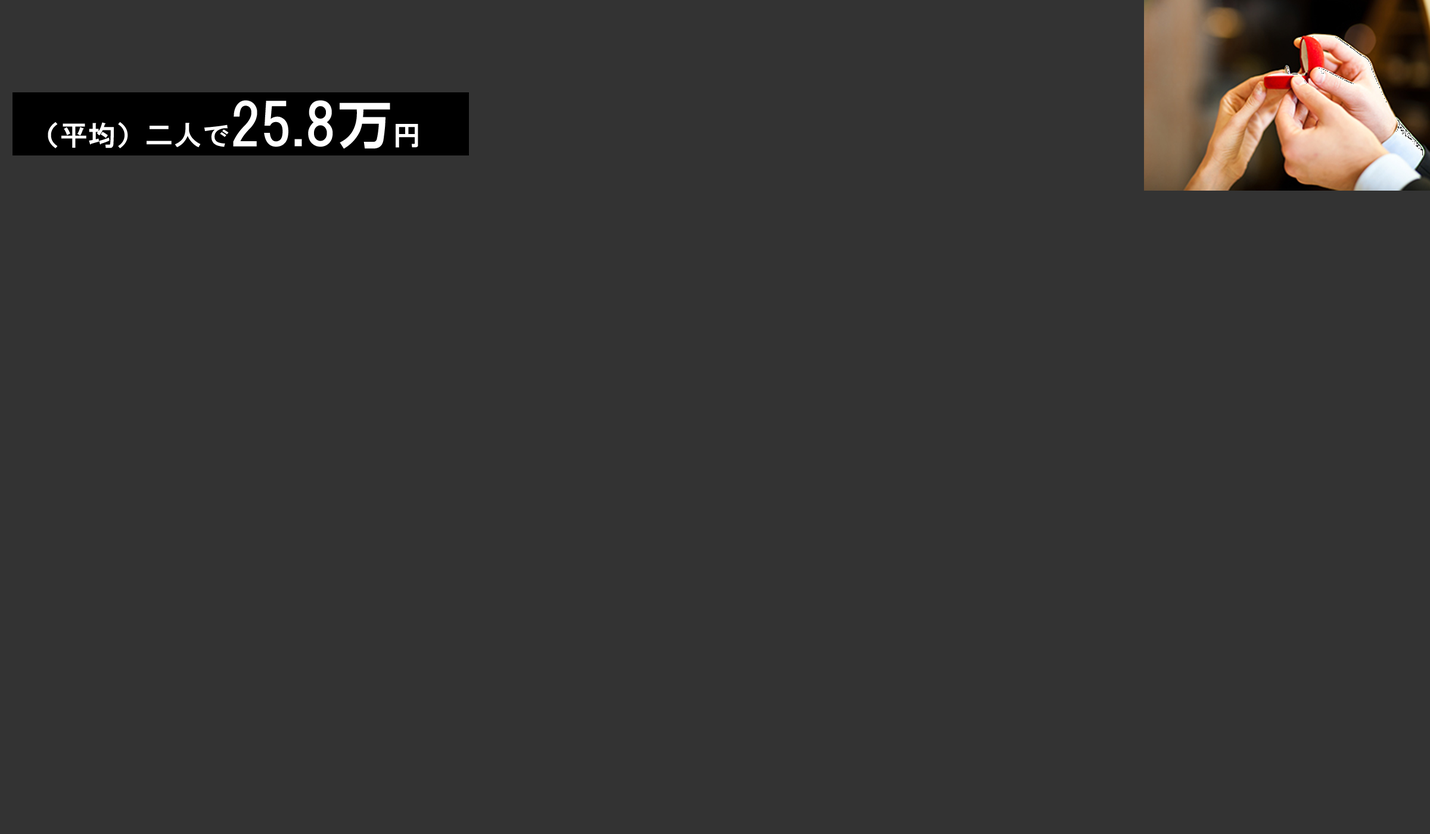
<style>
.page{position:relative;width:1430px;height:834px;background:#333333}
.page>*{position:absolute;margin:0}
.t1{font:28.5px "HGSGothicE";color:#ffffff}
.t2{font:57px "HGSGothicE";color:#ffffff}
</style>
<div class="page">
<p class="t1" style="left:48px;top:100px;width:370px;height:49px">（平均）二人で<span class="t2">25.8万</span>円</p>
</div>
